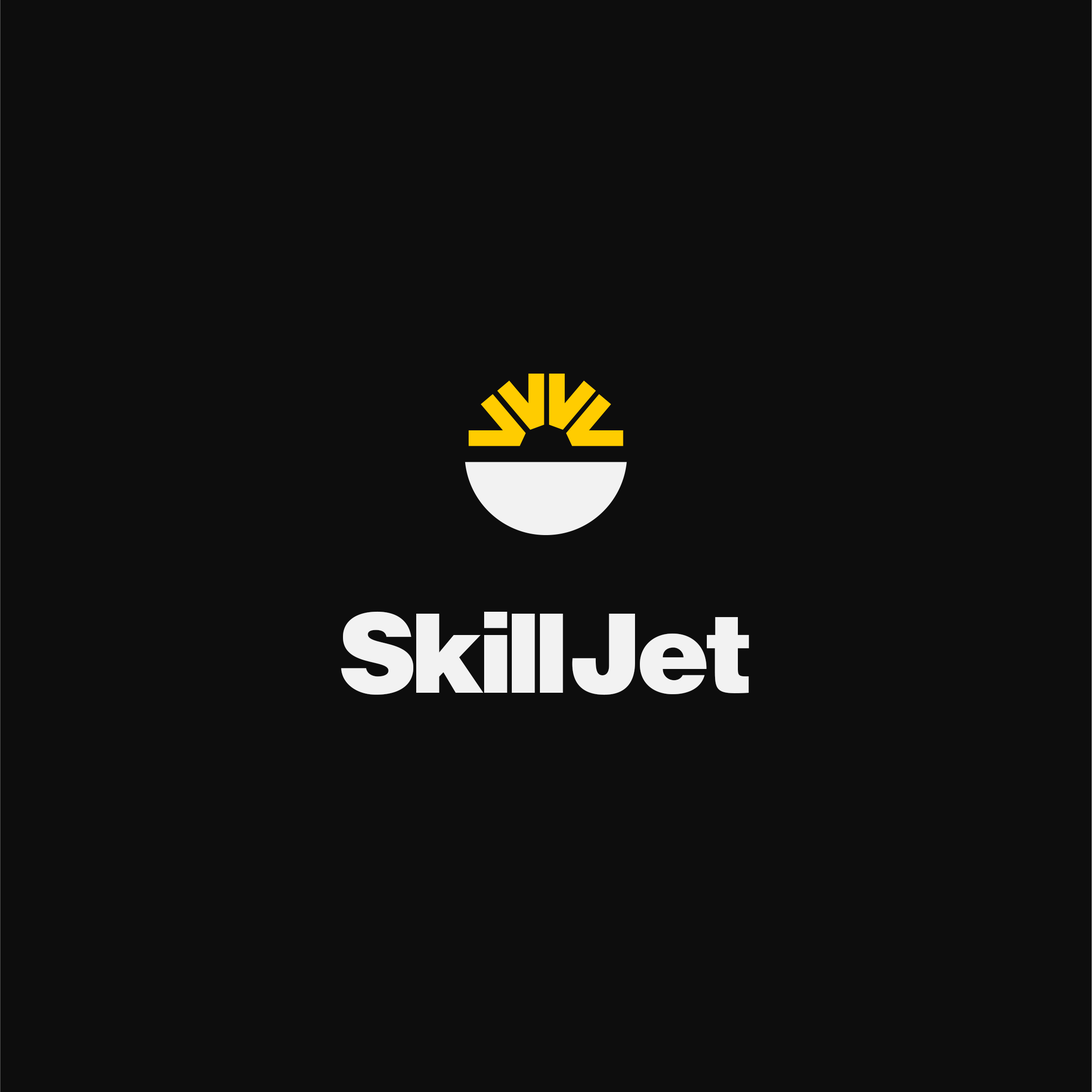
<style>
.page{position:relative;width:1092px;height:1092px;background:#0d0d0d}
.page>*{position:absolute;margin:0}
.t1{font:109.9px "Helvetica-Black";color:#f2f2f2}
</style>
<div class="page">
<p class="t1" style="left:341px;top:611px;width:408px;height:84px">SkillJet</p>
</div>
